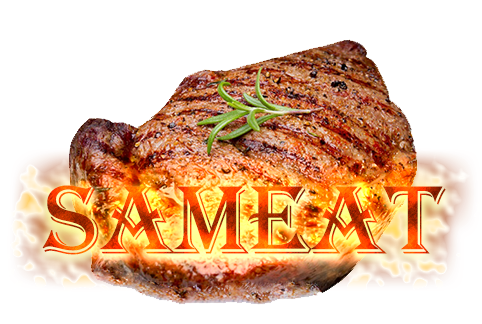
<style>
.page{position:relative;width:482px;height:324px;background:#ffffff}
.page>*{position:absolute;margin:0}
.t1{font:100px "Algerian"}
</style>
<div class="page">
<p class="t1" style="left:42px;top:185px;width:404px;height:70px">sameat</p>
</div>
